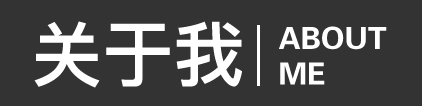
<style>
.page{position:relative;width:422px;height:106px;background:#333333}
.page>*{position:absolute;margin:0}
.t1{font:71.1px "PingFangSC-Heavy";color:#ffffff}
.t2{font:30.5px/35.6px "FZZYJW--GB1-0";color:#ffffff}
</style>
<div class="page">
<p class="t1" style="left:34px;top:21px;width:208px;height:67px">关于我</p>
<p class="t2" style="left:279px;top:26px;width:108px;height:59px">ABOUT <br>ME</p>
</div>
